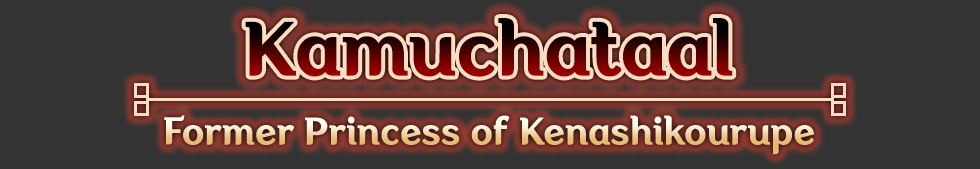
<style>
.page{position:relative;width:980px;height:169px;background:#333333}
.page>*{position:absolute;margin:0}
.t1{font:76px "Aligarh-SemiBold";letter-spacing:-0.02em;font-weight:bold}
.t2{font:38px "Aligarh-SemiBold";letter-spacing:-0.02em;font-weight:bold;scale:0.97 1}
</style>
<div class="page">
<p class="t1" style="left:245px;top:18px;width:488px;height:59px">Kamuchataal</p>
<p class="t1" style="left:245px;top:18px;width:488px;height:59px">Kamuchataal</p>
<p class="t2" style="left:164px;top:115px;width:650px;height:40px">Former Princess of Kenashikourupe</p>
<p class="t2" style="left:164px;top:115px;width:650px;height:40px">Former Princess of Kenashikourupe</p>
</div>
